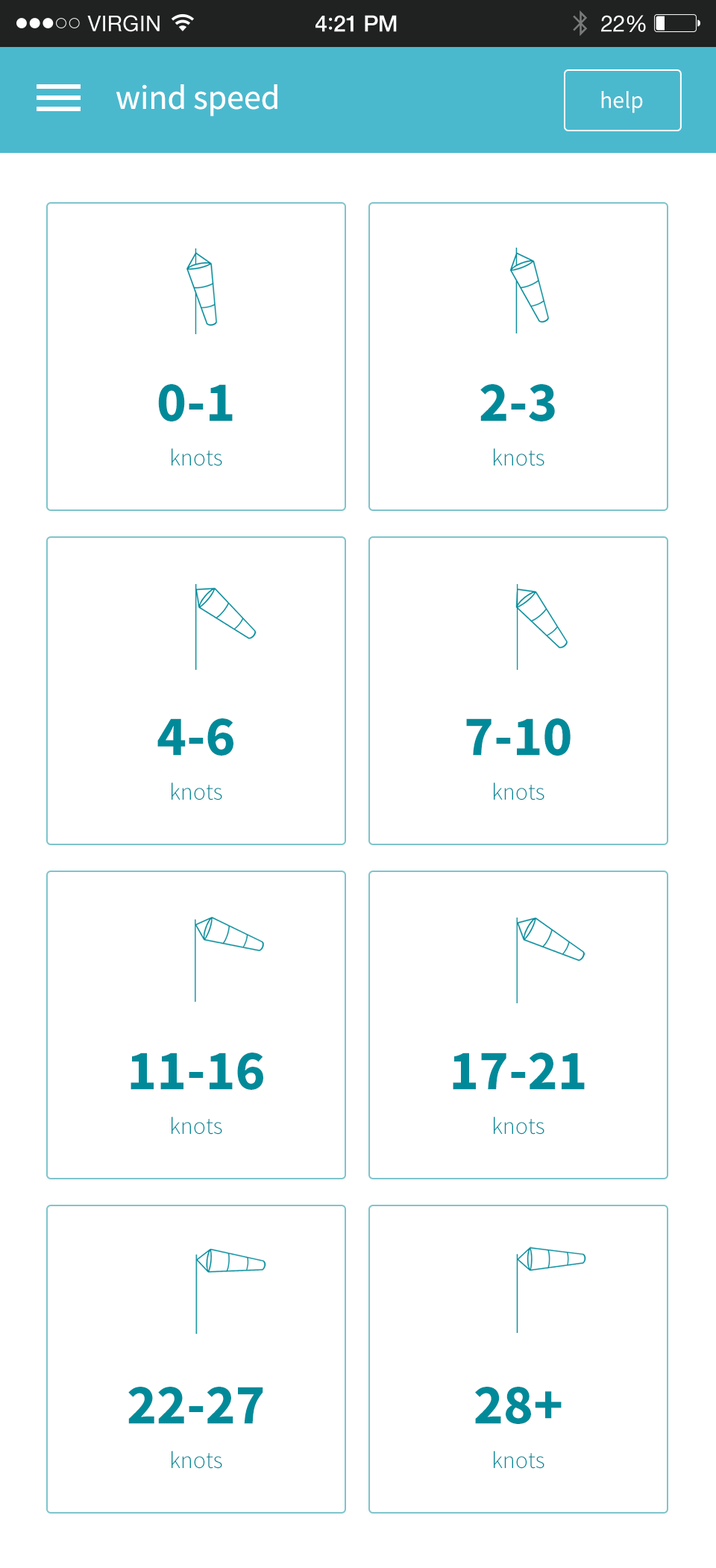
<style>
.page{position:relative;width:716px;height:1568px;background:#ffffff}
.page>*{position:absolute;margin:0}
.t1{font:34.3px "SourceSansPro-Regular";color:#ffffff}
.t2{font:23.9px "SourceSansPro-Regular";color:#ffffff}
.t3{font:56.7px "SourceSansPro-Bold";color:#008a99}
.t4{font:23.9px "SourceSansPro-Light";color:#008a99}
</style>
<div class="page">
<p class="t1" style="left:116px;top:84px;width:161px;height:32px">wind speed</p>
<p class="t2" style="left:601px;top:91px;width:42px;height:22px">help</p>
<p class="t3" style="left:158px;top:384px;width:75px;height:37px">0-1</p>
<p class="t3" style="left:480px;top:384px;width:75px;height:37px">2-3</p>
<p class="t4" style="left:172px;top:448px;width:50px;height:18px">knots</p>
<p class="t4" style="left:494px;top:448px;width:51px;height:18px">knots</p>
<p class="t3" style="left:157px;top:718px;width:76px;height:38px">4-6</p>
<p class="t3" style="left:466px;top:718px;width:105px;height:38px">7-10</p>
<p class="t4" style="left:172px;top:783px;width:50px;height:17px">knots</p>
<p class="t4" style="left:494px;top:783px;width:51px;height:17px">knots</p>
<p class="t3" style="left:131px;top:1053px;width:132px;height:37px">11-16</p>
<p class="t3" style="left:453px;top:1053px;width:132px;height:37px">17-21</p>
<p class="t4" style="left:172px;top:1117px;width:50px;height:18px">knots</p>
<p class="t4" style="left:494px;top:1117px;width:51px;height:18px">knots</p>
<p class="t3" style="left:128px;top:1387px;width:135px;height:37px">22-27</p>
<p class="t3" style="left:475px;top:1387px;width:87px;height:37px">28+</p>
<p class="t4" style="left:172px;top:1451px;width:50px;height:18px">knots</p>
<p class="t4" style="left:494px;top:1451px;width:51px;height:18px">knots</p>
</div>
